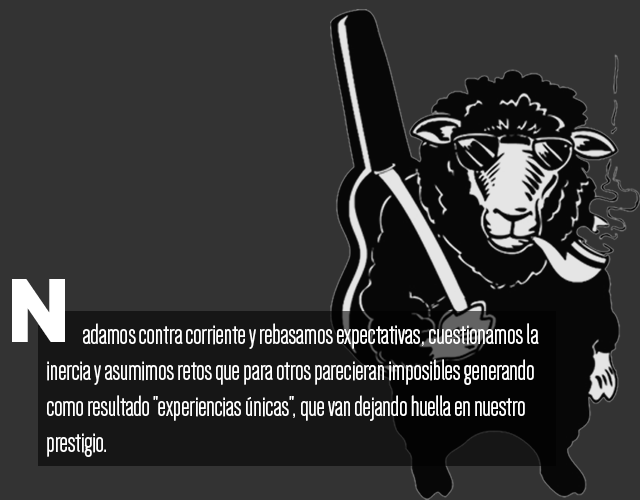
<style>
.page{position:relative;width:640px;height:500px;background:#333333}
.page>*{position:absolute;margin:0}
.t1{font:90px "Biko-Black";letter-spacing:-0.02em;color:#ffffff}
.t2{font:30px "Dense-Regular";letter-spacing:-0.02em;color:#ffffff}
</style>
<div class="page">
<p class="t1" style="left:12px;top:279px;width:53px;height:63px">N</p>
<p class="t2" style="left:47px;top:323px;width:492px;height:134px">adamos contra corriente y rebasamos expectativas, cuestionamos la inercia y asumimos retos que para otros parecieran imposibles generando como resultado "experiencias únicas", que van dejando huella en nuestro prestigio.</p>
</div>
